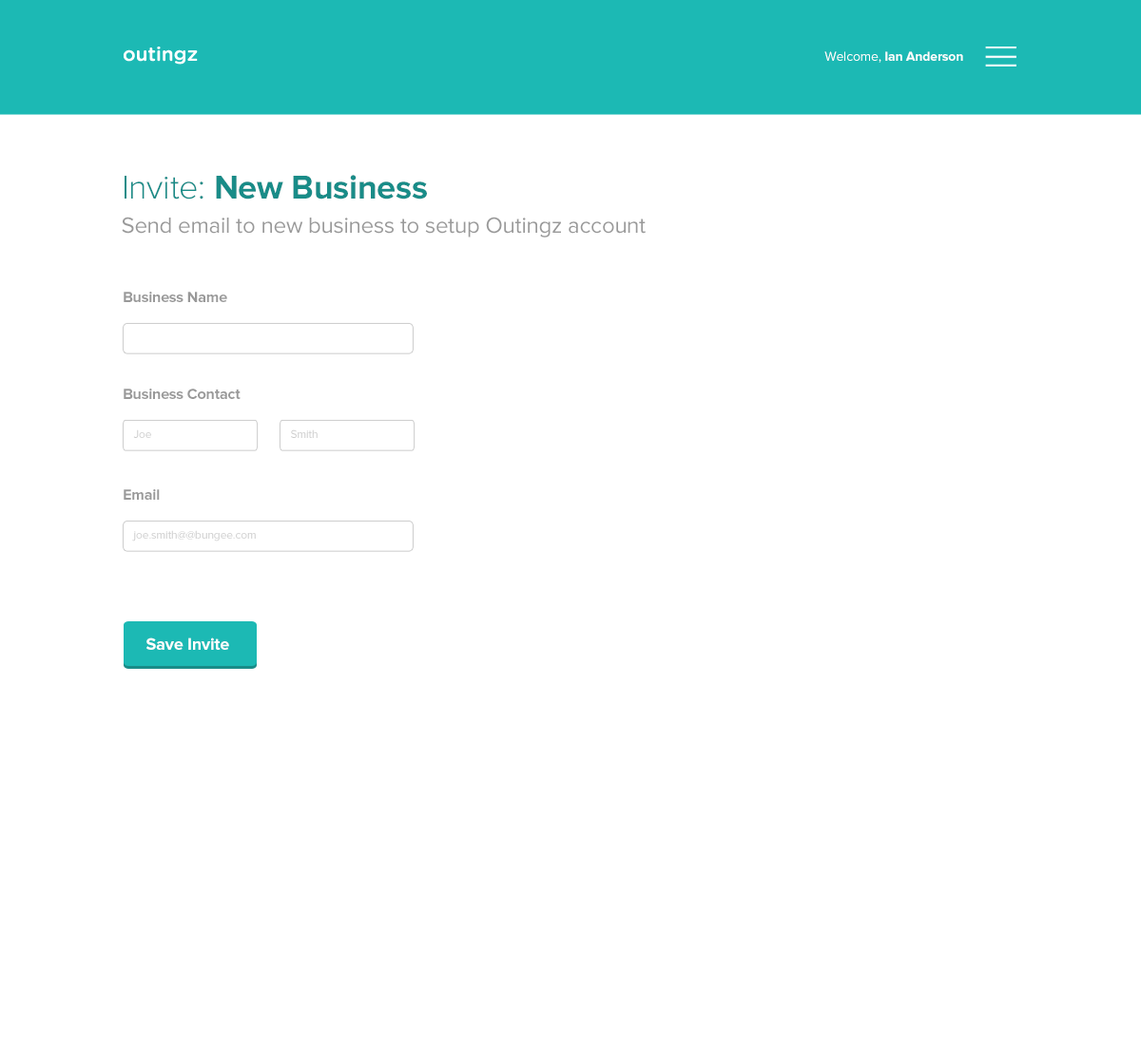
<style>
.page{position:relative;width:1141px;height:1045px;background:#ffffff}
.page>*{position:absolute;margin:0}
.t1{font:13.3px "ProximaNova-Bold";letter-spacing:-0.01em;color:#ffffff}
.t2{font:13.3px "ProximaNova-Regular";letter-spacing:-0.01em;color:#ffffff}
.t3{font:22.8px/34.2px "ProximaNova-Regular";letter-spacing:-0.01em;color:#999999}
.t4{font:34.2px "ProximaNova-Light";letter-spacing:-0.01em;color:#198c88}
.t5{font:34.2px "ProximaNova-Bold";letter-spacing:-0.01em;color:#198c88}
.t6{font:15.2px "ProximaNova-Bold";letter-spacing:-0.01em;color:#999999}
.t7{font:11.4px "ProximaNova-Regular";letter-spacing:-0.01em;color:#cccccc}
.t8{font:17.1px "ProximaNova-Bold";letter-spacing:-0.01em;color:#ffffff}
</style>
<div class="page">
<p class="t1" style="left:824px;top:51px;width:139px;height:12px"><span class="t2">Welcome, </span>Ian Anderson</p>
<p class="t3" style="left:122px;top:175px;width:523px;height:63px"><span class="t4">Invite:</span><span class="t5"> New Business<br></span>Send email to new business to setup Outingz account</p>
<p class="t6" style="left:124px;top:292px;width:103px;height:10px">Business Name</p>
<p class="t6" style="left:124px;top:389px;width:116px;height:10px">Business Contact</p>
<p class="t7" style="left:133px;top:430px;width:18px;height:8px">Joe</p>
<p class="t7" style="left:291px;top:430px;width:26px;height:8px">Smith</p>
<p class="t6" style="left:124px;top:489px;width:36px;height:11px">Email</p>
<p class="t7" style="left:132px;top:530px;width:124px;height:12px">joe.smith@@bungee.com</p>
<p class="t8" style="left:146px;top:638px;width:83px;height:12px">Save Invite</p>
</div>
